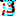
<style>
.page{position:relative;width:16px;height:16px;background:#ffffff}
.page>*{position:absolute;margin:0}
.t1{font:20px "MyriadPro-Regular"}
</style>
<div class="page">
<p class="t1" style="left:1px;top:0px;width:14px;height:17px">;3</p>
</div>
